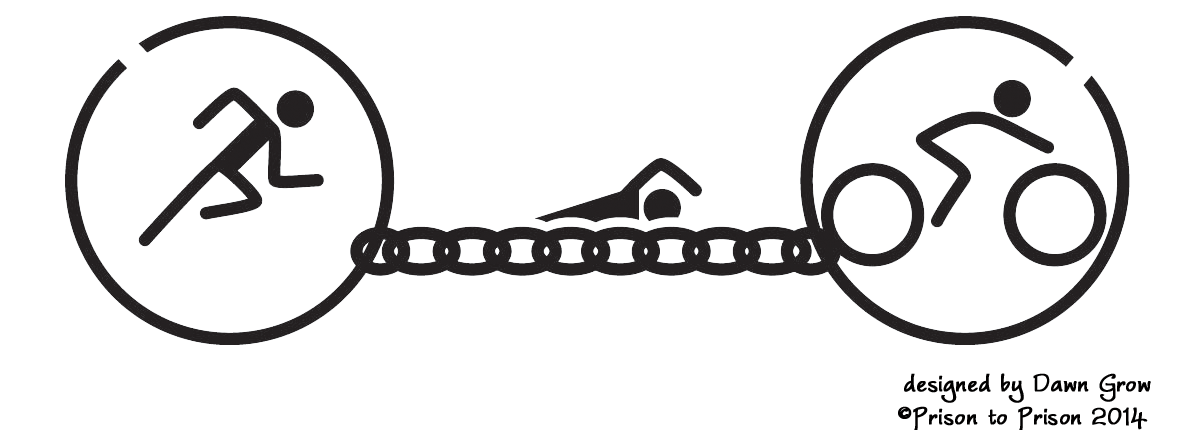
<style>
.page{position:relative;width:1200px;height:430px;background:#ffffff}
.page>*{position:absolute;margin:0}
.t1{font:33.3px/33.3px "WorstveldSlingBold";color:#010000;font-weight:bold}
</style>
<div class="page">
<p class="t1" style="left:898px;top:373px;width:253px;height:58px;text-align:center">designed by Dawn Grow<br>©Prison to Prison 2014</p>
</div>
